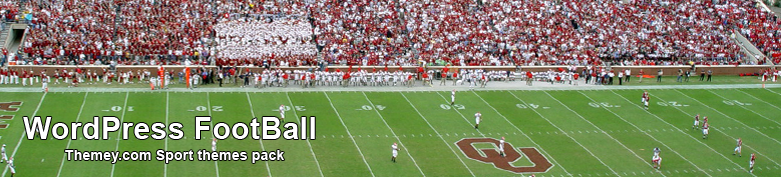
<style>
.page{position:relative;width:782px;height:177px}
.page>*{position:absolute;margin:0}
.t1{font:30px "Arial-BoldMT";letter-spacing:0.015em;color:#ffffff}
.t2{font:14px "Arial-BoldMT";letter-spacing:0.015em;color:#ffffff}
</style>
<div class="page">
<p class="t1" style="left:23px;top:117px;width:292px;height:22px">WordPress FootBall</p>
<p class="t2" style="left:65px;top:150px;width:219px;height:13px">Themey.com Sport themes pack</p>
</div>
